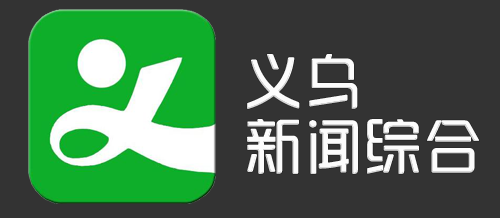
<style>
.page{position:relative;width:500px;height:218px;background:#333333}
.page>*{position:absolute;margin:0}
.t1{font:60px/65px "SJyunlvyuan";color:#fdfdfd}
</style>
<div class="page">
<p class="t1" style="left:247px;top:54px;width:232px;height:120px">义乌<br>新闻综合</p>
</div>
